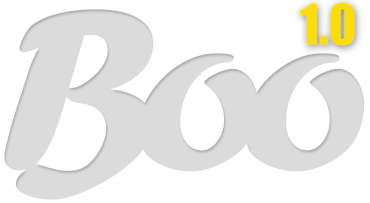
<style>
.page{position:relative;width:370px;height:203px;background:#ffffff}
.page>*{position:absolute;margin:0}
.t1{font:51.7px "Impacted";color:#fcdd0b}
.t2{font:240.2px "ForteMT";letter-spacing:-0.1em;color:#dbdbdb}
</style>
<div class="page">
<p class="t1" style="left:299px;top:2px;width:56px;height:44px">1.0</p>
<p class="t2" style="left:4px;top:9px;width:360px;height:191px">Boo</p>
</div>
